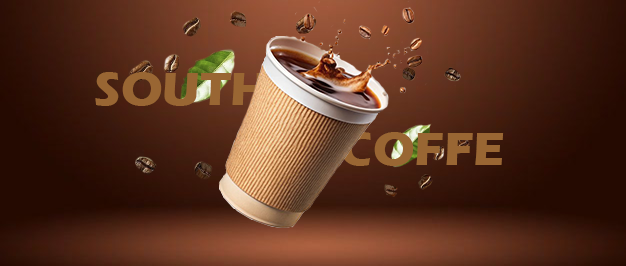
<style>
.page{position:relative;width:626px;height:266px}
.page>*{position:absolute;margin:0}
.t1{font:48px "ErasITC-Bold";color:#996633}
</style>
<div class="page">
<p class="t1" style="left:95px;top:72px;width:173px;height:34px">SOUTH</p>
<p class="t1" style="left:341px;top:132px;width:163px;height:34px">COFFE</p>
</div>
